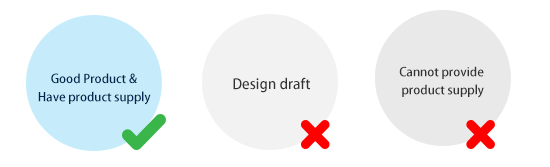
<style>
.page{position:relative;width:550px;height:167px;background:#ffffff}
.page>*{position:absolute;margin:0}
.t1{font:12px "AdobeHeitiStd-Regular";color:#00274f}
.t2{font:14px "AdobeHeitiStd-Regular";color:#333333}
.t3{font:12px/18px "AdobeHeitiStd-Regular";color:#333333}
</style>
<div class="page">
<p class="t1" style="left:51px;top:73px;width:86px;height:11px">Good Product &amp;</p>
<p class="t2" style="left:233px;top:77px;width:77px;height:16px">Design draft</p>
<p class="t3" style="left:399px;top:66px;width:85px;height:32px;text-align:center">Cannot provide <br>product supply</p>
<p class="t1" style="left:38px;top:91px;width:113px;height:14px">Have product supply</p>
</div>
